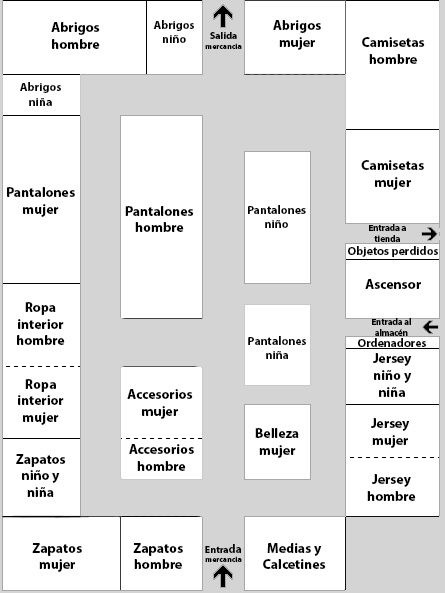
<style>
.page{position:relative;width:445px;height:593px;background:#ffffff}
.page>*{position:absolute;margin:0}
.t1{font:13.8px "MyriadPro-Bold";color:#000000}
.t2{font:12px "MyriadPro-Bold";color:#000000}
.t3{font:7.9px "MyriadPro-Bold";color:#000000}
.t4{font:9.9px "MyriadPro-Bold";color:#000000}
.t5{font:11.9px "MyriadPro-Bold";color:#000000}
.t6{font:8.9px "MyriadPro-Bold";color:#000000}
</style>
<div class="page">
<p class="t1" style="left:51px;top:22px;width:49px;height:27px;text-align:center">Abrigos<br>hombre</p>
<p class="t2" style="left:153px;top:20px;width:41px;height:23px;text-align:center">Abrigos niño</p>
<p class="t1" style="left:273px;top:20px;width:48px;height:30px;text-align:center">Abrigos<br>mujer</p>
<p class="t3" style="left:205px;top:32px;width:37px;height:17px;text-align:center"><span class="t4">Salida </span>mercancia</p>
<p class="t1" style="left:362px;top:37px;width:63px;height:27px;text-align:center">Camisetas<br>hombre</p>
<p class="t2" style="left:20px;top:82px;width:41px;height:24px;text-align:center">Abrigos<br>niña</p>
<p class="t1" style="left:361px;top:160px;width:63px;height:30px;text-align:center">Camisetas<br>mujer</p>
<p class="t1" style="left:7px;top:187px;width:68px;height:30px;text-align:center">Pantalones<br>mujer</p>
<p class="t1" style="left:125px;top:206px;width:69px;height:26px;text-align:center">Pantalones<br>hombre</p>
<p class="t5" style="left:248px;top:205px;width:58px;height:23px;text-align:center">Pantalones<br>niño</p>
<p class="t6" style="left:369px;top:224px;width:37px;height:18px;text-align:center">Entrada a <br>tienda</p>
<p class="t5" style="left:348px;top:246px;width:90px;height:11px">Objetos perdidos</p>
<p class="t1" style="left:365px;top:279px;width:56px;height:10px">Ascensor</p>
<p class="t1" style="left:17px;top:302px;width:48px;height:43px;text-align:center">Ropa interior hombre</p>
<p class="t6" style="left:372px;top:318px;width:39px;height:18px;text-align:center">Entrada al <br>almacén</p>
<p class="t2" style="left:248px;top:336px;width:58px;height:23px;text-align:center">Pantalones niña</p>
<p class="t5" style="left:358px;top:338px;width:68px;height:9px">Ordenadores</p>
<p class="t1" style="left:373px;top:353px;width:39px;height:44px;text-align:center">Jersey<br>niño y <br>niña</p>
<p class="t1" style="left:18px;top:379px;width:46px;height:46px;text-align:center">Ropa<br>interior<br>mujer</p>
<p class="t1" style="left:127px;top:389px;width:66px;height:30px;text-align:center">Accesorios<br>mujer</p>
<p class="t1" style="left:371px;top:418px;width:39px;height:30px;text-align:center">Jersey<br>mujer</p>
<p class="t1" style="left:255px;top:428px;width:44px;height:30px;text-align:center">Belleza<br>mujer</p>
<p class="t1" style="left:129px;top:444px;width:65px;height:27px;text-align:center">Accesorios<br>hombre</p>
<p class="t1" style="left:16px;top:454px;width:50px;height:43px;text-align:center">Zapatos<br>niño y <br>niña</p>
<p class="t1" style="left:367px;top:474px;width:49px;height:27px;text-align:center">Jersey hombre</p>
<p class="t1" style="left:32px;top:543px;width:50px;height:29px;text-align:center">Zapatos<br>mujer</p>
<p class="t1" style="left:133px;top:543px;width:50px;height:26px;text-align:center">Zapatos<br>hombre</p>
<p class="t3" style="left:205px;top:544px;width:37px;height:18px;text-align:center"><span class="t4">Entra</span><span class="t2">da<br></span>mercancia</p>
<p class="t1" style="left:263px;top:543px;width:63px;height:26px;text-align:center">Medias y Calcetines</p>
</div>
